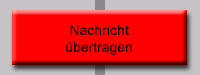
<style>
.page{position:relative;width:200px;height:75px;background:#ff0000}
.page>*{position:absolute;margin:0}
.t1{font:14px "ArialMT";color:#000000}
</style>
<div class="page">
<p class="t1" style="left:66px;top:25px;width:66px;height:30px;text-align:center">Nachricht<br>übertragen</p>
</div>
